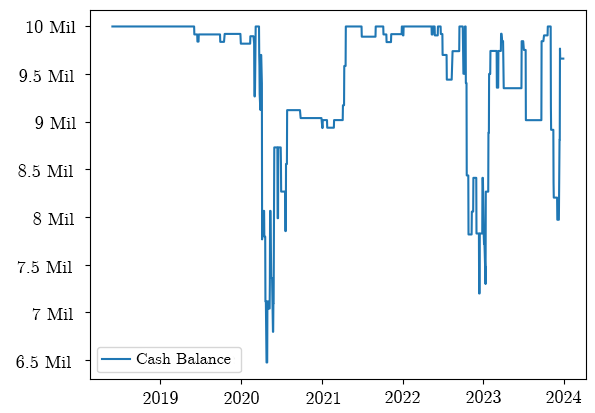
<style>
.page{position:relative;width:595px;height:413px;background:#ffffff}
.page>*{position:absolute;margin:0}
.t1{font:18px "CMUSerif-Roman";color:#000000}
.t2{font:16px "CMUSerif-Roman";color:#000000}
</style>
<div class="page">
<p class="t1" style="left:26px;top:20px;width:50px;height:13px">10 Mil</p>
<p class="t1" style="left:19px;top:69px;width:55px;height:13px">9.5 Mil</p>
<p class="t1" style="left:35px;top:116px;width:41px;height:13px">9 Mil</p>
<p class="t1" style="left:18px;top:164px;width:55px;height:13px">8.5 Mil</p>
<p class="t1" style="left:33px;top:212px;width:41px;height:13px">8 Mil</p>
<p class="t1" style="left:17px;top:261px;width:55px;height:12px">7.5 Mil</p>
<p class="t1" style="left:32px;top:308px;width:41px;height:12px">7 Mil</p>
<p class="t2" style="left:136px;top:353px;width:95px;height:11px">Cash Balance</p>
<p class="t1" style="left:16px;top:355px;width:55px;height:13px">6.5 Mil</p>
<p class="t1" style="left:385px;top:390px;width:35px;height:13px">2022</p>
<p class="t1" style="left:466px;top:390px;width:35px;height:13px">2023</p>
<p class="t1" style="left:546px;top:390px;width:36px;height:13px">2024</p>
<p class="t1" style="left:143px;top:391px;width:35px;height:13px">2019</p>
<p class="t1" style="left:224px;top:391px;width:35px;height:13px">2020</p>
<p class="t1" style="left:306px;top:391px;width:35px;height:13px">2021</p>
</div>
